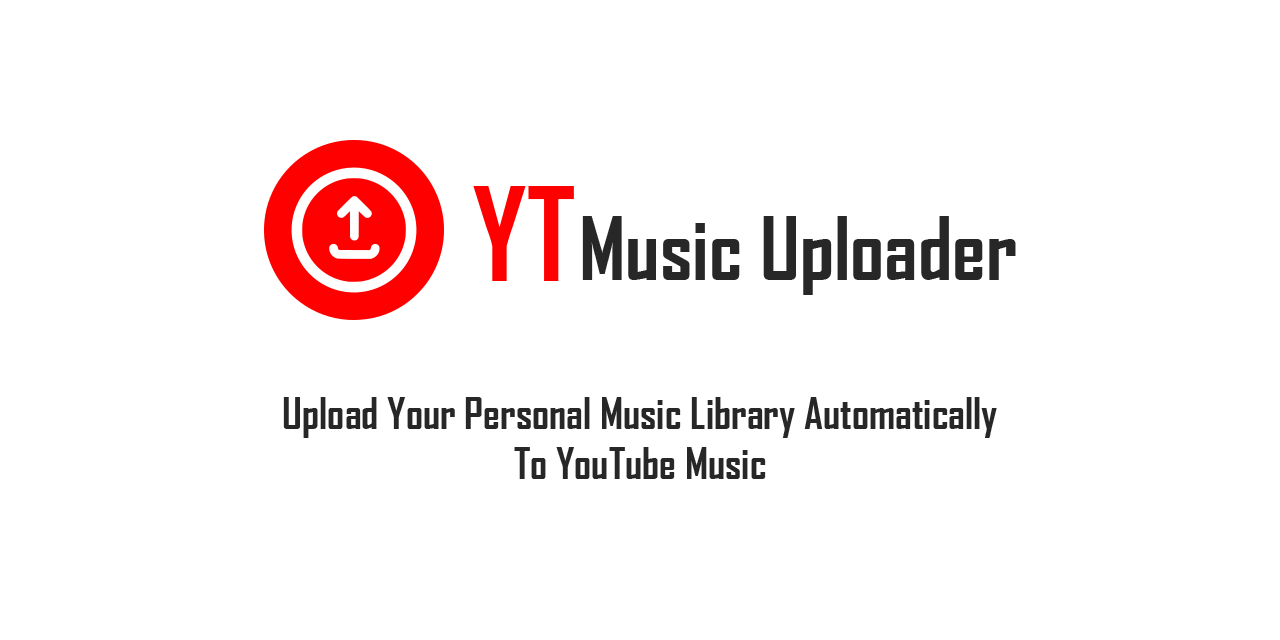
<style>
.page{position:relative;width:1280px;height:640px;background:#ffffff}
.page>*{position:absolute;margin:0}
.t1{font:124px "AgencyFB-Bold";color:#ff0000}
.t2{font:84px "AgencyFB-Bold";color:#272727}
.t3{font:42px "AgencyFB-Bold";color:#272727}
</style>
<div class="page">
<p class="t1" style="left:473px;top:186px;width:101px;height:95px">YT</p>
<p class="t2" style="left:582px;top:216px;width:434px;height:79px">Music Uploader</p>
<p class="t3" style="left:283px;top:397px;width:714px;height:82px;text-align:center">Upload Your Personal Music Library Automatically<br>To YouTube Music</p>
</div>
